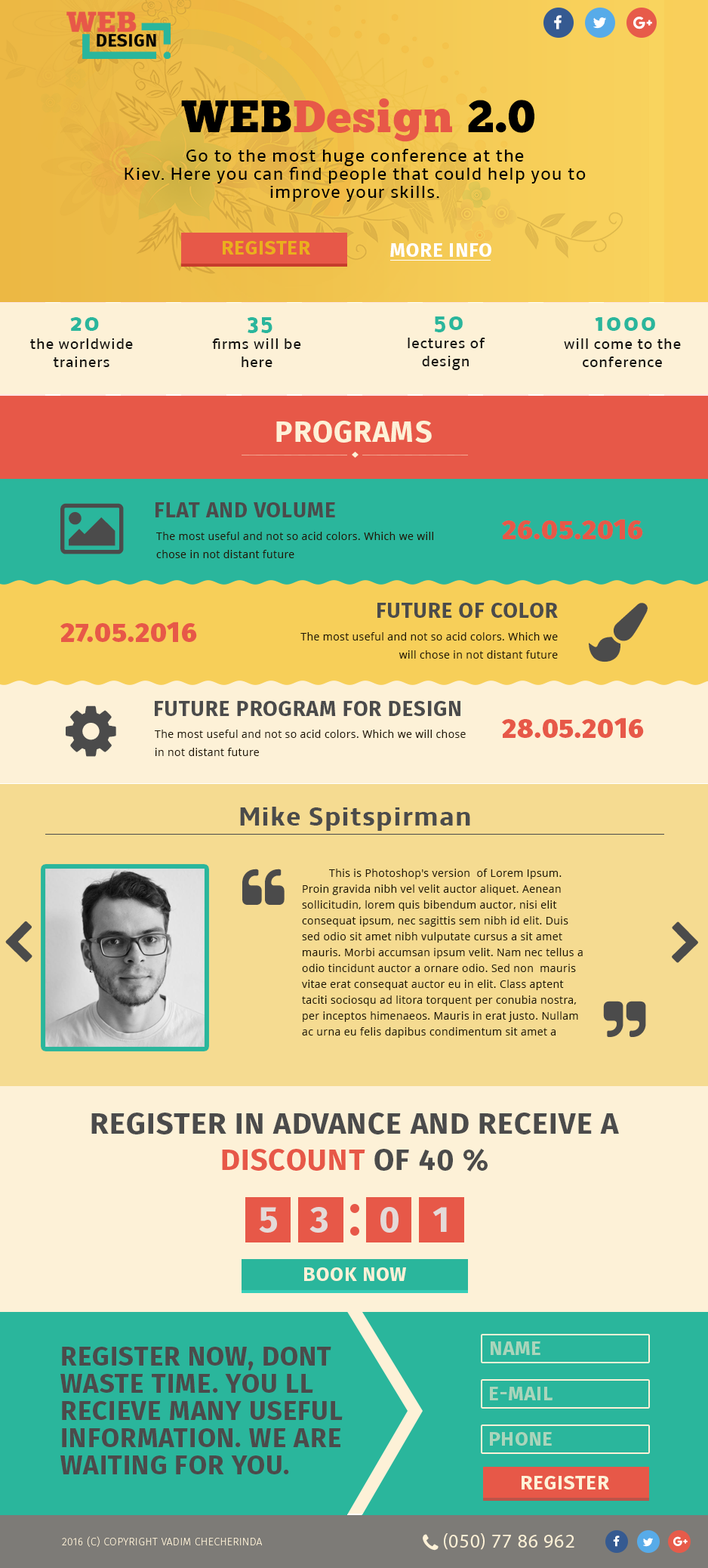
<style>
.page{position:relative;width:708px;height:1568px;background:#fdf1d7}
.page>*{position:absolute;margin:0}
.t1{font:45.3px "ChunkFive-Roman";letter-spacing:0.03em;color:#000000}
.t2{font:45.3px "ChunkFive-Roman";letter-spacing:0.03em;color:#e75848}
.t3{font:18.1px/18.1px "Amble-Regular";letter-spacing:0.03em;color:#000000}
.t4{font:19.6px "FiraSans-Bold";letter-spacing:0.03em;color:#eaaf1d;text-transform:uppercase}
.t5{font:19.6px "FiraSans-Bold";letter-spacing:0.03em;color:#fffefe;text-transform:uppercase}
.t6{font:15.1px/18.1px "Amble-Regular";letter-spacing:0.03em;color:#12110e}
.t7{font:22.7px/18.1px "Nobile-Bold";letter-spacing:0.03em;color:#12110e}
.t8{font:22.7px/18.1px "Nobile-Bold";letter-spacing:0.03em;color:#2ab69c}
.t9{font:29.5px "FiraSans-Bold";letter-spacing:0.03em;color:#fdf1d7;text-transform:uppercase}
.t10{font:21.1px "FiraSans-Bold";letter-spacing:0.03em;color:#4b4b4b;text-transform:uppercase}
.t11{font:27.2px "FiraSans-Heavy";letter-spacing:0.03em;color:#e75848;text-transform:uppercase}
.t12{font:10.6px/18.1px "OpenSans";letter-spacing:0.03em;color:#211806}
.t13{font:27.2px "Amble-Bold";letter-spacing:0.03em;color:#4b4b4b}
.t14{font:10.6px/15.9px "OpenSans";letter-spacing:0.03em;color:#211806}
.t15{font:29.5px/36.3px "FiraSans-Bold";letter-spacing:0.03em;color:#4b4b4b;text-transform:uppercase}
.t16{font:29.5px/36.3px "FiraSans-Bold";letter-spacing:0.03em;color:#e75848;text-transform:uppercase}
.t17{font:36.3px "FiraSans-Bold";letter-spacing:0.03em;color:#e4dad8;text-transform:uppercase}
.t18{font:19.6px "FiraSans-Bold";letter-spacing:0.03em;color:#fdf1d7;text-transform:uppercase}
.t19{font:26.4px/27.2px "FiraSans-Bold";letter-spacing:0.03em;color:#4b4b4b;text-transform:uppercase}
.t20{font:19.6px "FiraSans-Bold";letter-spacing:0.03em;color:#aad5bb;text-transform:uppercase}
.t21{font:10.6px "FiraSans-UltraLight";letter-spacing:0.03em;color:#fdf1d7;text-transform:uppercase}
.t22{font:19.6px "MyriadPro-Regular";letter-spacing:0.03em;color:#fdf1d7;text-transform:uppercase}
</style>
<div class="page">
<p class="t1" style="left:181px;top:98px;width:354px;height:44px">WEB<span class="t2">Design</span> 2.0 Conference</p>
<p class="t3" style="left:125px;top:149px;width:461px;height:53px;text-align:center">Go to the most huge conference at the <br>Kiev. Here you can find people that could help you to improve your skills.</p>
<p class="t4" style="left:223px;top:241px;width:87px;height:14px">Register</p>
<p class="t5" style="left:390px;top:243px;width:102px;height:14px">More info</p>
<p class="t6" style="left:30px;top:317px;width:103px;height:50px;text-align:center"><span class="t7"> </span><span class="t8">20 <br></span>the worldwide trainers</p>
<p class="t6" style="left:212px;top:317px;width:89px;height:50px;text-align:center"><span class="t7"> </span><span class="t8">35 <br></span>firms will be here</p>
<p class="t6" style="left:408px;top:316px;width:78px;height:54px;text-align:center"><span class="t7"> </span><span class="t8">50 <br></span>lectures of<br>design</p>
<p class="t6" style="left:564px;top:317px;width:117px;height:50px;text-align:center"><span class="t7"> </span><span class="t8">1000 <br></span>will come to the conference</p>
<p class="t9" style="left:276px;top:421px;width:156px;height:22px">Programs</p>
<p class="t10" style="left:156px;top:502px;width:179px;height:15px">Flat and Volume</p>
<p class="t11" style="left:502px;top:519px;width:142px;height:20px">26.05.2016</p>
<p class="t12" style="left:156px;top:532px;width:278px;height:26px">The most useful and not so acid colors. Which we will chose in not distant future</p>
<p class="t10" style="left:378px;top:603px;width:180px;height:15px">Future of color</p>
<p class="t11" style="left:60px;top:622px;width:137px;height:20px">27.05.2016</p>
<p class="t12" style="left:301px;top:632px;width:257px;height:27px;text-align:right">The most useful and not so acid colors. Which we will chose in not distant future</p>
<p class="t10" style="left:155px;top:701px;width:306px;height:15px">Future program for design</p>
<p class="t11" style="left:502px;top:718px;width:142px;height:20px">28.05.2016</p>
<p class="t12" style="left:155px;top:730px;width:311px;height:26px">The most useful and not so acid colors. Which we will chose in not distant future</p>
<p class="t13" style="left:240px;top:807px;width:231px;height:24px">Mike Spitspirman</p>
<p class="t14" style="left:302px;top:869px;width:281px;height:169px">This is Photoshop's version  of Lorem Ipsum. Proin gravida nibh vel velit auctor aliquet. Aenean sollicitudin, lorem quis bibendum auctor, nisi elit consequat ipsum, nec sagittis sem nibh id elit. Duis sed odio sit amet nibh vulputate cursus a sit amet mauris. Morbi accumsan ipsum velit. Nam nec tellus a odio tincidunt auctor a ornare odio. Sed non  mauris vitae erat consequat auctor eu in elit. Class aptent taciti sociosqu ad litora torquent per conubia nostra, per inceptos himenaeos. Mauris in erat justo. Nullam ac urna eu felis dapibus condimentum sit amet a augue. Sed non neque elit. Sed ut imperdiet nisi. Proin condimentum fermentum nunc. Etiam pharetra, erat sed fermentum feugiat, velit mauris egestas quam, ut aliquam massa nisl quis neque. Suspendisse in orci enim.</p>
<p class="t15" style="left:91px;top:1113px;width:528px;height:58px;text-align:center">Register in advance and receive a <span class="t16">discount </span>of 40 %</p>
<p class="t17" style="left:259px;top:1207px;width:18px;height:26px">5</p>
<p class="t17" style="left:310px;top:1207px;width:18px;height:26px">3</p>
<p class="t17" style="left:381px;top:1207px;width:18px;height:26px">0</p>
<p class="t17" style="left:433px;top:1207px;width:14px;height:25px">1</p>
<p class="t18" style="left:304px;top:1267px;width:102px;height:14px">book NOW</p>
<p class="t19" style="left:60px;top:1347px;width:283px;height:127px">Register now, dont waste time. You ll recieve many useful information. We are waiting for you.</p>
<p class="t20" style="left:491px;top:1341px;width:50px;height:14px">Name</p>
<p class="t20" style="left:490px;top:1387px;width:63px;height:13px">E-mail</p>
<p class="t20" style="left:490px;top:1432px;width:62px;height:14px">Phone</p>
<p class="t18" style="left:522px;top:1476px;width:88px;height:13px">Register</p>
<p class="t21" style="left:62px;top:1536px;width:200px;height:11px">2016 (c) copyright vadim checherinda</p>
<p class="t22" style="left:444px;top:1533px;width:131px;height:17px">(050) 77 86 962</p>
</div>
